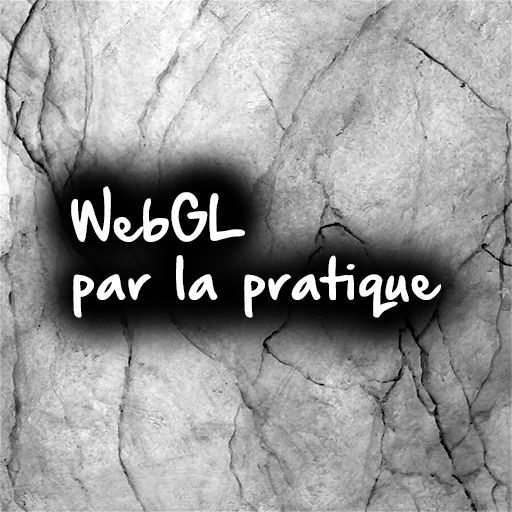
<style>
.page{position:relative;width:512px;height:512px}
.page>*{position:absolute;margin:0}
.t1{font:48px "HandOfSeanDemo";color:#ffffff}
</style>
<div class="page">
<p class="t1" style="left:71px;top:186px;width:370px;height:132px">WebGL<br>par la pratique</p>
</div>
